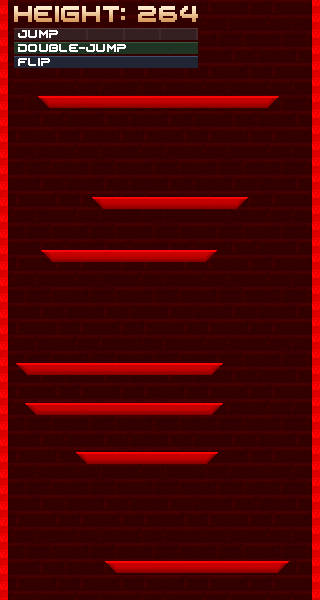
<style>
.page{position:relative;width:320px;height:600px;background:#320000}
.page>*{position:absolute;margin:0}
.t1{font:24px "BMjapanA12";letter-spacing:0.025em}
.t2{font:12px "BMjapanA12";letter-spacing:0.025em;color:#ffffff}
</style>
<div class="page">
<p class="t1" style="left:14px;top:6px;width:184px;height:16px">HEIGHT: 264</p>
<p class="t2" style="left:18px;top:30px;width:40px;height:8px">JUMP</p>
<p class="t2" style="left:18px;top:44px;width:108px;height:8px">DOUBLE-JUMP</p>
<p class="t2" style="left:18px;top:58px;width:32px;height:8px">FLIP</p>
</div>
